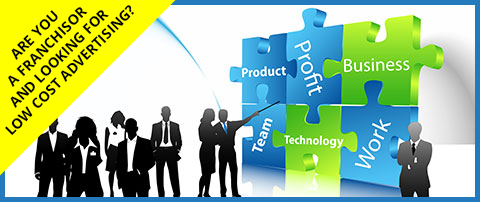
<style>
.page{position:relative;width:480px;height:202px}
.page>*{position:absolute;margin:0}
.t1{font:14px "OpenSans-Bold";color:#000000}
</style>
<div class="page">
<p class="t1" style="left:5px;top:5px;width:129px;height:130px;text-align:center;rotate:-45deg">ARE YOU <br>A FRANCHISOR<br>AND LOOKING FOR <br>LOW COST ADVERTISING?</p>
</div>
